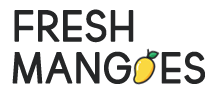
<style>
.page{position:relative;width:216px;height:96px;background:#ffffff}
.page>*{position:absolute;margin:0}
.t1{font:44px "thebrooklynbold";letter-spacing:0.025em;color:#252627;font-weight:bold}
.t2{font:43.7px "thebrooklynbold";letter-spacing:0.025em;color:#252627;font-weight:bold}
</style>
<div class="page">
<p class="t1" style="left:14px;top:9px;width:120px;height:34px">FRESH</p>
<p class="t2" style="left:12px;top:51px;width:193px;height:33px">MANG  ES</p>
</div>
